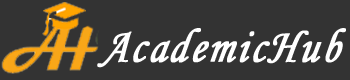
<style>
.page{position:relative;width:350px;height:80px;background:#333333}
.page>*{position:absolute;margin:0}
.t1{font:47.9px "MonotypeCorsiva";letter-spacing:0.045em;color:#ffffff;font-weight:bold;font-style:italic;scale:0.87 1}
</style>
<div class="page">
<p class="t1" style="left:97px;top:28px;width:249px;height:40px">AcademicHub</p>
</div>
